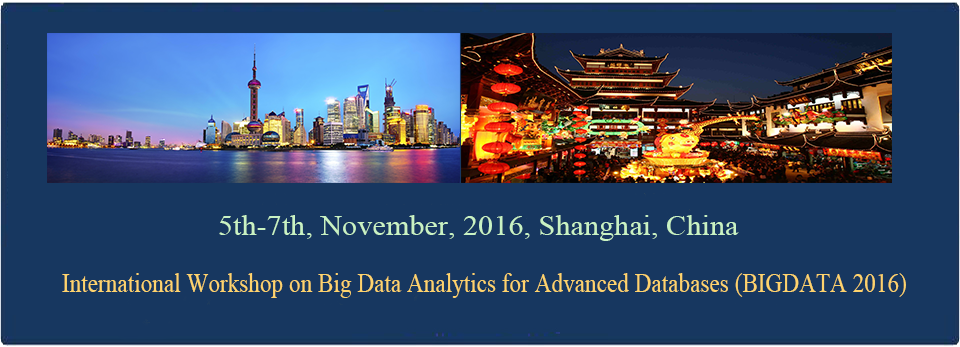
<style>
.page{position:relative;width:960px;height:347px;background:#173760}
.page>*{position:absolute;margin:0}
.t1{font:28.3px "TimesNewRomanPSMT";color:#c9f2c3;scale:1.07 1}
.t2{font:26.7px "TimesNewRomanPSMT";color:#fed36d;scale:0.87 1}
</style>
<div class="page">
<p class="t1" style="left:219px;top:215px;width:520px;height:26px">5th-7th, November, 2016, Shanghai, China</p>
<p class="t2" style="left:62px;top:273px;width:844px;height:25px">International Workshop on Big Data Analytics for Advanced Databases (BIGDATA 2016)</p>
</div>
